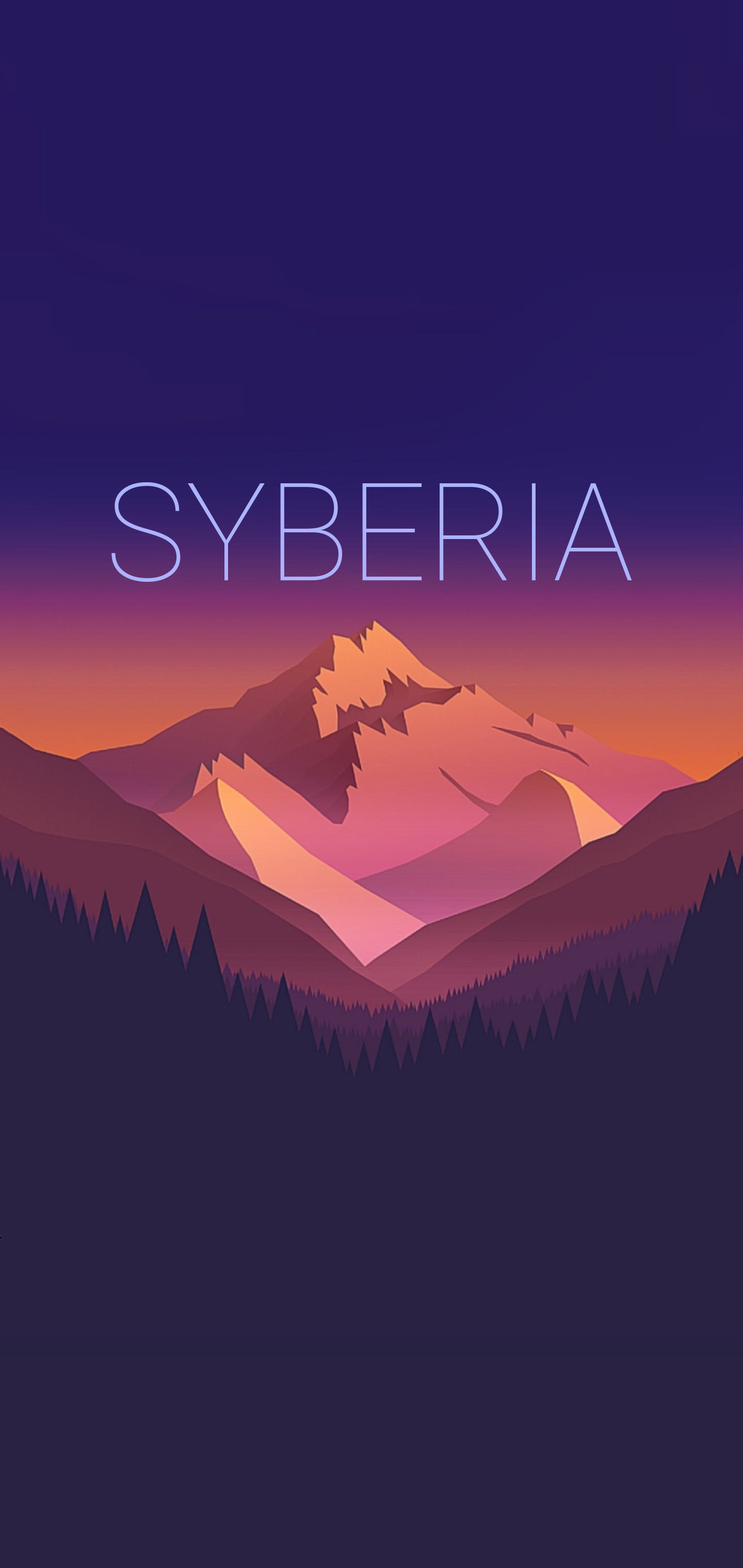
<style>
.page{position:relative;width:743px;height:1568px;background:#292243}
.page>*{position:absolute;margin:0}
.t1{font:136.1px "Roboto-Thin";color:#acb3ff}
</style>
<div class="page">
<p class="t1" style="left:111px;top:482px;width:521px;height:100px">SYBERIA</p>
</div>
